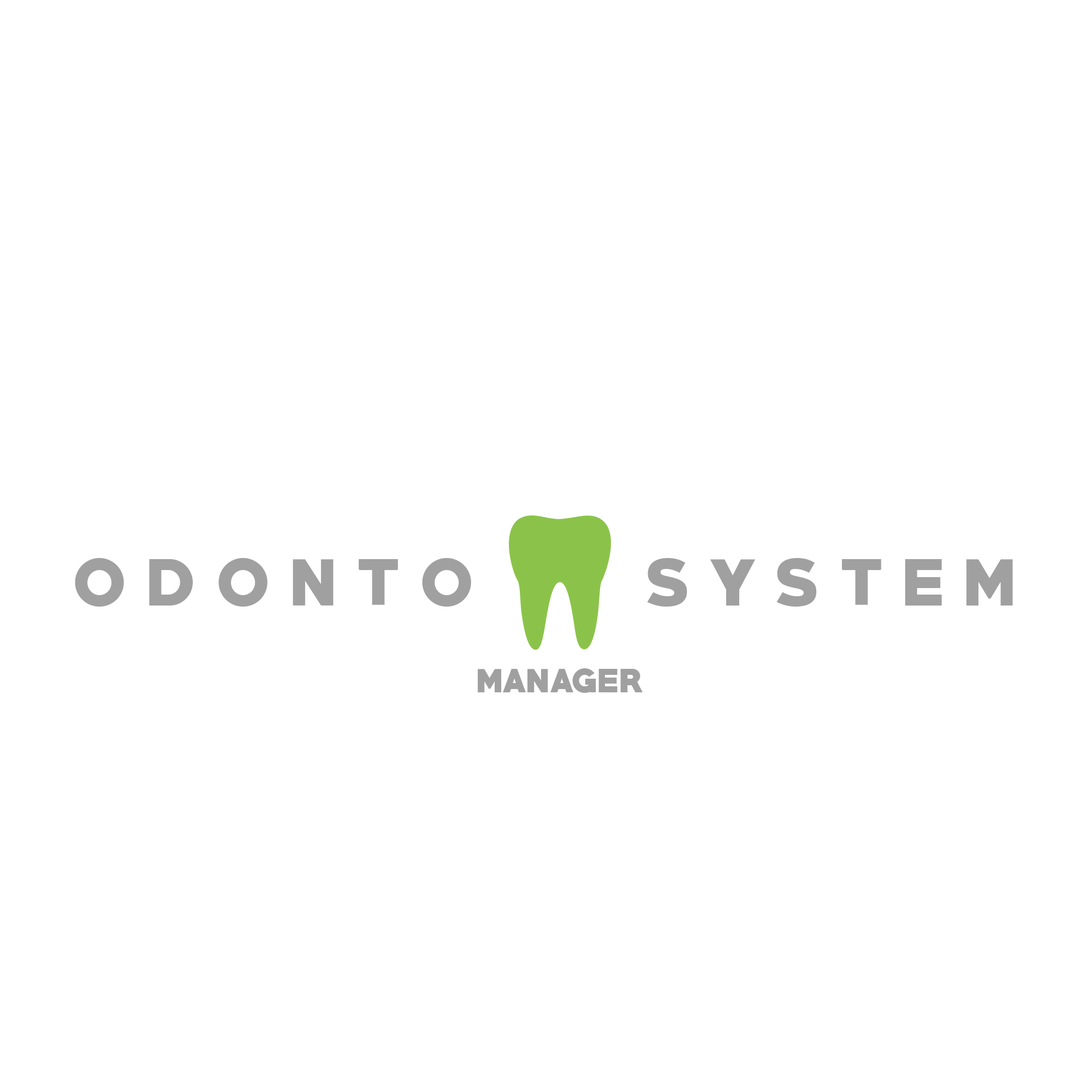
<style>
.page{position:relative;width:1092px;height:1092px;background:#ffffff}
.page>*{position:absolute;margin:0}
.t1{font:59.4px "PRIMETIME-Regular";color:#a0a0a0}
.t2{font:35.4px "PRIMETIME-Regular";color:#a0a0a0}
</style>
<div class="page">
<p class="t1" style="left:75px;top:558px;width:938px;height:49px">O D O N T O         S Y S T E M</p>
<p class="t2" style="left:478px;top:668px;width:165px;height:25px">manager</p>
</div>
